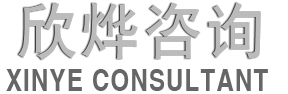
<style>
.page{position:relative;width:288px;height:94px;background:#ffffff}
.page>*{position:absolute;margin:0}
.t1{font:60px "HYb1gj";letter-spacing:0.05em;color:#bbbbbb;text-transform:uppercase}
.t2{font:31.2px "CTCuHeiSJ";letter-spacing:0.05em;color:#666666;text-transform:uppercase;scale:0.77 1}
</style>
<div class="page">
<p class="t1" style="left:18px;top:2px;width:243px;height:58px">欣烨咨询</p>
<p class="t2" style="left:6px;top:69px;width:262px;height:22px">XINYE CONSULTANT</p>
</div>
